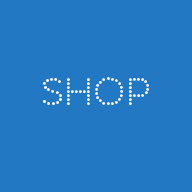
<style>
.page{position:relative;width:192px;height:192px;background:#2278c3}
.page>*{position:absolute;margin:0}
.t1{font:36px "Perfograma";color:#ffffff}
</style>
<div class="page">
<p class="t1" style="left:43px;top:77px;width:106px;height:28px">SHOP</p>
</div>
